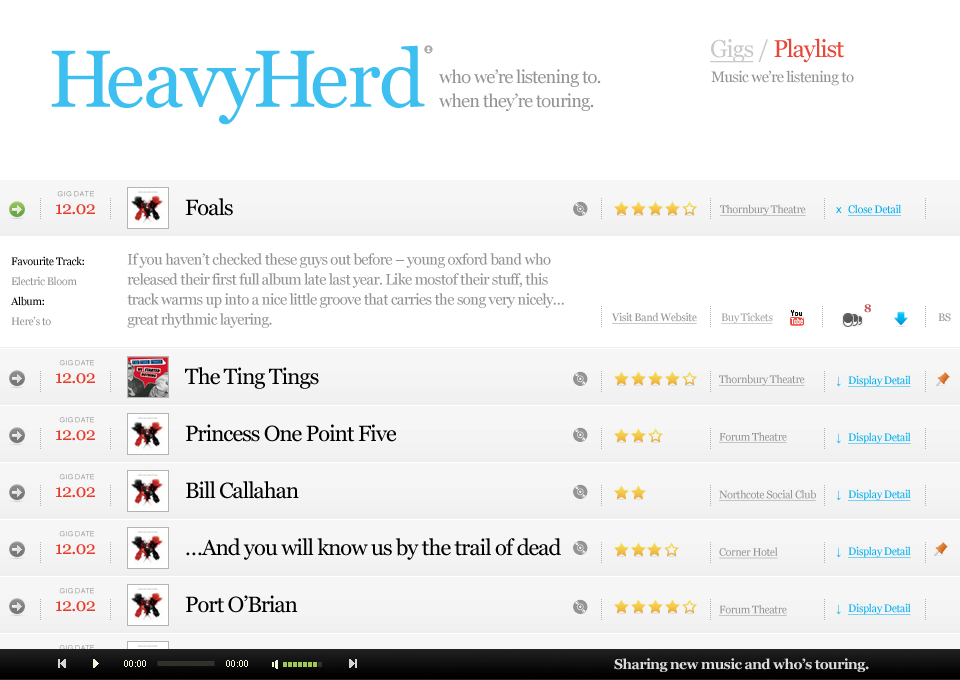
<style>
.page{position:relative;width:960px;height:680px;background:#ffffff}
.page>*{position:absolute;margin:0}
.t1{font:24px "Georgia";letter-spacing:-0.04em;color:#e94637}
.t2{font:24px "Georgia";letter-spacing:-0.04em;color:#c9c9c9;text-decoration:underline}
.t3{font:24px "Georgia";letter-spacing:-0.04em;color:#c9c9c9}
.t4{font:80.7px "Georgia";letter-spacing:-0.04em;color:#3dc0f0}
.t5{font:18px/24px "Georgia";letter-spacing:-0.04em;color:#949494}
.t6{font:15px "Georgia";letter-spacing:-0.04em;color:#949494}
.t7{font:7px "ArialMT"}
.t8{font:22px "Georgia";letter-spacing:-0.04em;color:#000000}
.t9{font:18px "Georgia";letter-spacing:-0.04em;color:#e73a2a}
.t10{font:11px "Georgia";letter-spacing:-0.04em;color:#949494;text-decoration:underline}
.t11{font:11px "Georgia";letter-spacing:-0.04em;color:#00aeef;text-decoration:underline}
.t12{font:11px "ArialMT";letter-spacing:-0.04em;color:#00aeef}
.t13{font:11px/20px "Georgia";letter-spacing:-0.04em;color:#000000}
.t14{font:11px/20px "Georgia";letter-spacing:-0.04em;color:#949494}
.t15{font:15px/20px "Georgia";letter-spacing:-0.04em;color:#949494}
.t16{font:11px "Georgia-Bold";letter-spacing:-0.04em;color:#bc5653}
.t17{font:11px "Georgia";letter-spacing:-0.04em;color:#a1a1a1;text-decoration:underline}
.t18{font:11px "Georgia";letter-spacing:-0.04em;color:#949494}
.t19{font:22px/57px "Georgia";letter-spacing:-0.04em;color:#000000}
.t20{font:11px/57.6px "Georgia";letter-spacing:-0.04em;color:#949494;text-decoration:underline}
.t21{font:14px "Georgia-Bold";letter-spacing:-0.04em;color:#dbdbdb}
</style>
<div class="page">
<p class="t1" style="left:710px;top:38px;width:134px;height:25px"><span class="t2">Gigs</span><span class="t3"> / </span>Playlist</p>
<p class="t4" style="left:51px;top:45px;width:374px;height:80px">HeavyHerd</p>
<p class="t5" style="left:439px;top:69px;width:162px;height:42px">who we’re listening to.<br>when they’re touring.</p>
<p class="t6" style="left:711px;top:70px;width:143px;height:16px">Music we’re listening to</p>
<p class="t7" style="left:57px;top:191px;width:37px;height:6px">GIG DATE</p>
<p class="t8" style="left:185px;top:198px;width:48px;height:18px">Foals</p>
<p class="t9" style="left:56px;top:204px;width:39px;height:11px">12.02</p>
<p class="t10" style="left:720px;top:204px;width:86px;height:12px">Thornbury Theatre</p>
<p class="t11" style="left:836px;top:204px;width:65px;height:12px"><span class="t12">x   </span>Close Detail</p>
<p class="t13" style="left:10px;top:256px;width:74px;height:70px">Favourite Track:<br><span class="t14">Electric Bloom<br></span>Album:<br><span class="t14">Here’s to</span></p>
<p class="t15" style="left:127px;top:253px;width:437px;height:75px">If you haven’t checked these guys out before – young oxford band who released their first full album late last year. Like mostof their stuff, this <br>track warms up into a nice little groove that carries the song very nicely… great rhythmic layering.</p>
<p class="t16" style="left:864px;top:304px;width:7px;height:9px">8</p>
<p class="t10" style="left:611px;top:312px;width:86px;height:12px">Visit Band Website</p>
<p class="t17" style="left:721px;top:312px;width:52px;height:12px">Buy Tickets</p>
<p class="t18" style="left:938px;top:313px;width:13px;height:9px">BS</p>
<p class="t19" style="left:185px;top:367px;width:376px;height:246px">The Ting Tings<br>Princess One Point Five<br>Bill Callahan<br>…And you will know us by the trail of dead<br>Port O’Brian</p>
<p class="t20" style="left:719px;top:374px;width:97px;height:242px">Thornbury Theatre<br>Forum Theatre<br>Northcote Social Club<br>Corner Hotel<br>Forum Theatre</p>
<p class="t21" style="left:614px;top:658px;width:255px;height:14px">Sharing new music and who’s touring.</p>
</div>
